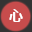
<style>
.page{position:relative;width:32px;height:32px;background:#c74c4c}
.page>*{position:absolute;margin:0}
.t1{font:14px "Meiryo-Bold";color:#ffffff}
</style>
<div class="page">
<p class="t1" style="left:9px;top:9px;width:14px;height:13px">心</p>
</div>
